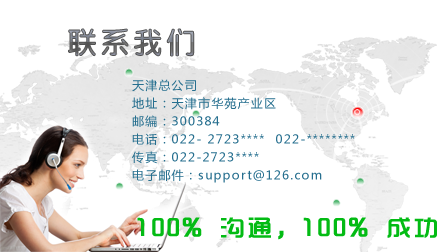
<style>
.page{position:relative;width:437px;height:252px;background:#ffffff}
.page>*{position:absolute;margin:0}
.t1{font:30px "FZY4JW--GB1-0";letter-spacing:0.1em}
.t2{font:12px/18px "MicrosoftYaHei";letter-spacing:0.1em;color:#266f8f}
.t3{font:24px "TRENDS";letter-spacing:0.1em;color:#03bb14;font-weight:bold}
</style>
<div class="page">
<p class="t1" style="left:68px;top:28px;width:127px;height:29px">联系我们</p>
<p class="t2" style="left:132px;top:79px;width:223px;height:104px">天津总公司<br>地址：天津市华苑产业区           <br>邮编：300384<br>电话：022- 2723****  022-********<br>传真：022-2723****<br>电子邮件：support@126.com</p>
<p class="t3" style="left:137px;top:217px;width:300px;height:23px">100% 沟通，100% 成功</p>
</div>
